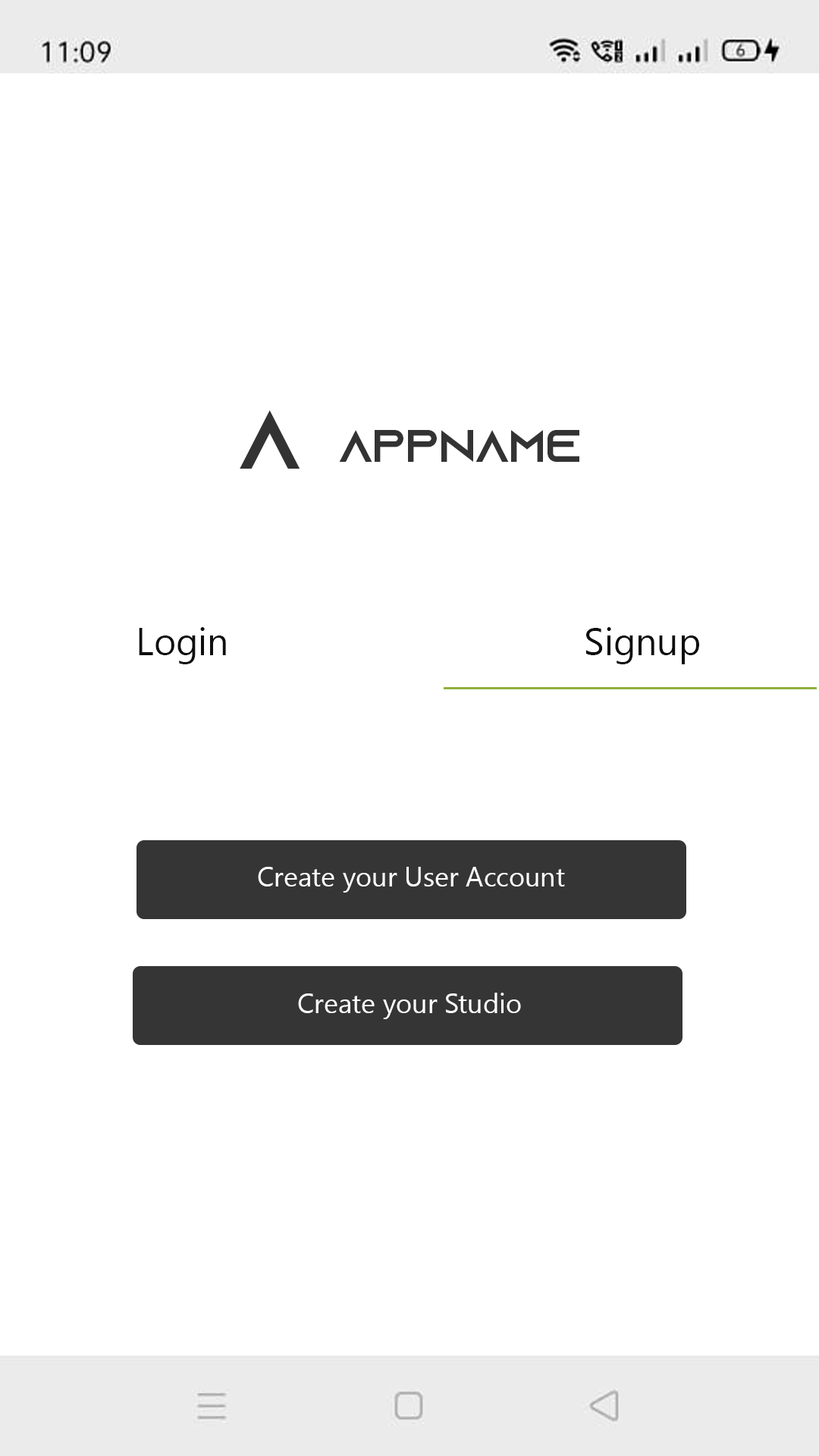
<style>
.page{position:relative;width:819px;height:1456px;background:#ffffff}
.page>*{position:absolute;margin:0}
.t1{font:83.9px "AzonixRegular";color:#333333}
.t2{font:45.5px "AzonixRegular";color:#333333}
.t3{font:37.9px "SegoeUI";color:#0e0e0f}
.t4{font:27.3px "SegoeUI";color:#ffffff}
</style>
<div class="page">
<p class="t1" style="left:240px;top:410px;width:60px;height:59px">A</p>
<p class="t2" style="left:339px;top:430px;width:240px;height:32px">AppName</p>
<p class="t3" style="left:139px;top:627px;width:87px;height:37px">Login</p>
<p class="t3" style="left:585px;top:627px;width:114px;height:37px">Signup</p>
<p class="t4" style="left:258px;top:867px;width:307px;height:26px">Create your User Account</p>
<p class="t4" style="left:298px;top:993px;width:223px;height:26px">Create your Studio</p>
</div>
